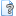
<style>
.page{position:relative;width:16px;height:16px;background:#ffffff}
.page>*{position:absolute;margin:0}
.t1{font:12px "LucidaConsole";color:#dbdbdb}
</style>
<div class="page">
<p class="t1" style="left:7px;top:5px;width:6px;height:8px">?</p>
</div>
